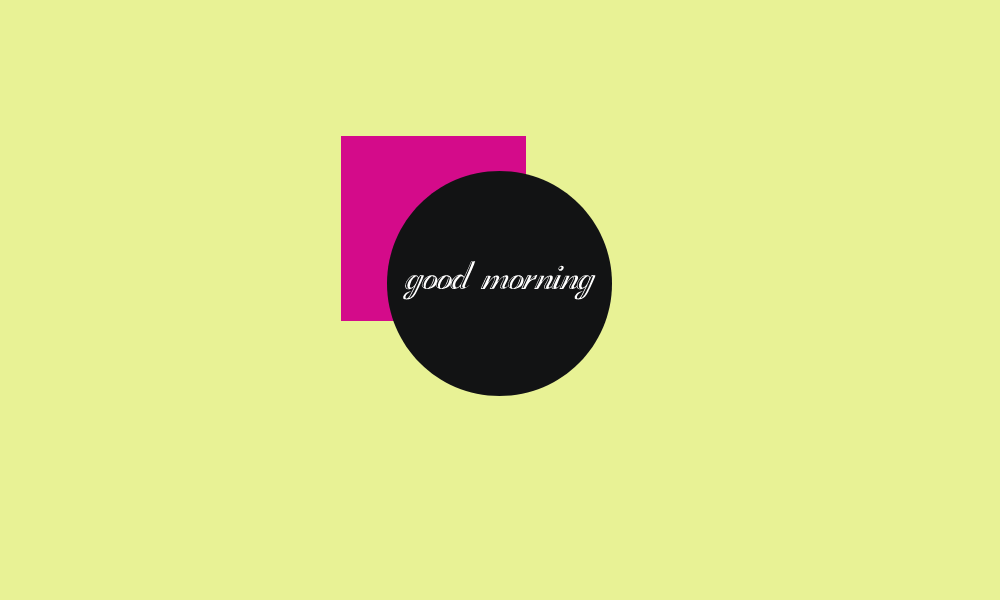
<style>
.page{position:relative;width:1000px;height:600px;background:#e8f295}
.page>*{position:absolute;margin:0}
.t1{font:60px "Rechtman-Plain";color:#ffffff;font-style:italic}
</style>
<div class="page">
<p class="t1" style="left:403px;top:261px;width:193px;height:39px">good morning</p>
</div>
